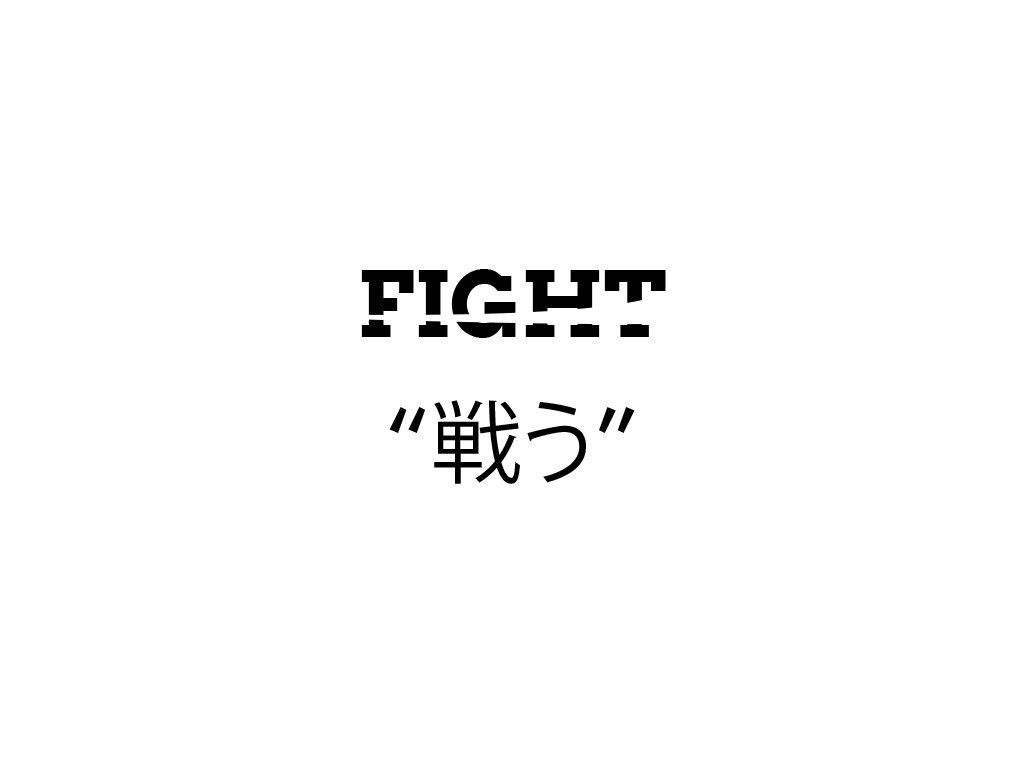
<style>
.page{position:relative;width:1024px;height:768px;background:#ffffff}
.page>*{position:absolute;margin:0}
.t1{font:90px "Arvo-Bold";color:#000000}
.t2{font:90px "KozGoPr6N-Regular";color:#000000}
.t3{font:90px "Arvo";color:#000000}
</style>
<div class="page">
<p class="t1" style="left:361px;top:269px;width:305px;height:69px">FIGHT</p>
<p class="t2" style="left:389px;top:400px;width:246px;height:84px"><span class="t3">“</span>戦う<span class="t3">”</span></p>
</div>
